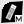
<style>
.page{position:relative;width:24px;height:24px;background:#000000}
.page>*{position:absolute;margin:0}
.t1{font:7.9px "Montserrat-Bold";color:#000000}
</style>
<div class="page">
<p class="t1" style="left:15px;top:16px;width:7px;height:6px">M</p>
</div>
